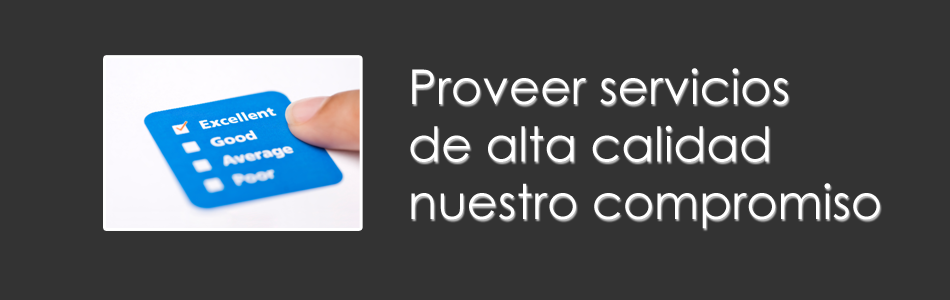
<style>
.page{position:relative;width:950px;height:300px;background:#333333}
.page>*{position:absolute;margin:0}
.t1{font:48px "CenturyGothic";color:#ffffff}
</style>
<div class="page">
<p class="t1" style="left:410px;top:68px;width:470px;height:161px">Proveer servicios<br>de alta calidad<br>nuestro compromiso</p>
</div>
